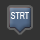
<style>
.page{position:relative;width:40px;height:40px;background:#333333}
.page>*{position:absolute;margin:0}
.t1{font:9px "MicrosoftSansSerif";color:#fefefe;scale:0.78 1}
</style>
<div class="page">
<p class="t1" style="left:10px;top:12px;width:19px;height:7px">STRT</p>
</div>
